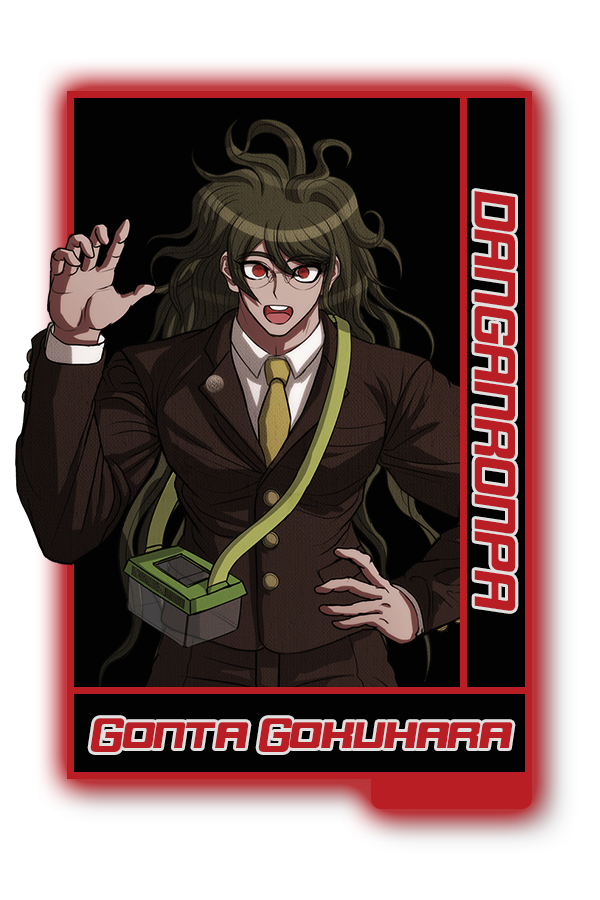
<style>
.page{position:relative;width:600px;height:900px;background:#ffffff}
.page>*{position:absolute;margin:0}
.t1{font:48.8px "DorBlue";color:#bb2c2e}
.t2{font:40.6px "DorBlue";color:#bb2c2e}
</style>
<div class="page">
<p class="t1" style="left:474px;top:191px;width:42px;height:420px;rotate:90deg">DANGANRONPA</p>
<p class="t2" style="left:90px;top:718px;width:423px;height:34px">Gonta Gokuhara</p>
</div>
